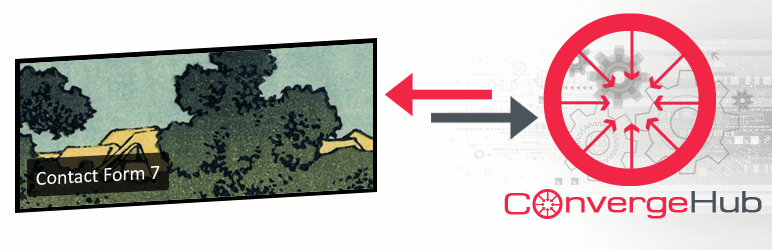
<style>
.page{position:relative;width:772px;height:250px;background:#fefefd}
.page>*{position:absolute;margin:0}
.t1{font:220.7px "Comfortaa";color:#f12545}
.t2{font:20px "Calibri";color:#ffffff}
.t3{font:27px "Michroma";color:#f12545;font-weight:bold}
.t4{font:38.3px "Comfortaa";color:#f12545}
.t5{font:27px "Michroma";color:#e0a420}
.t6{font:27px "Michroma";color:#4c545b;font-weight:bold}
</style>
<div class="page">
<p class="t1" style="left:543px;top:13px;width:173px;height:173px">O</p>
<p class="t2" style="left:36px;top:165px;width:124px;height:20px;rotate:-3deg">Contact Form 7</p>
<p class="t3" style="left:504px;top:193px;width:26px;height:22px">C</p>
<p class="t4" style="left:532px;top:189px;width:31px;height:30px">O</p>
<p class="t3" style="left:566px;top:191px;width:196px;height:28px"><span class="t5">     </span>nverge<span class="t6">Hub</span></p>
</div>
